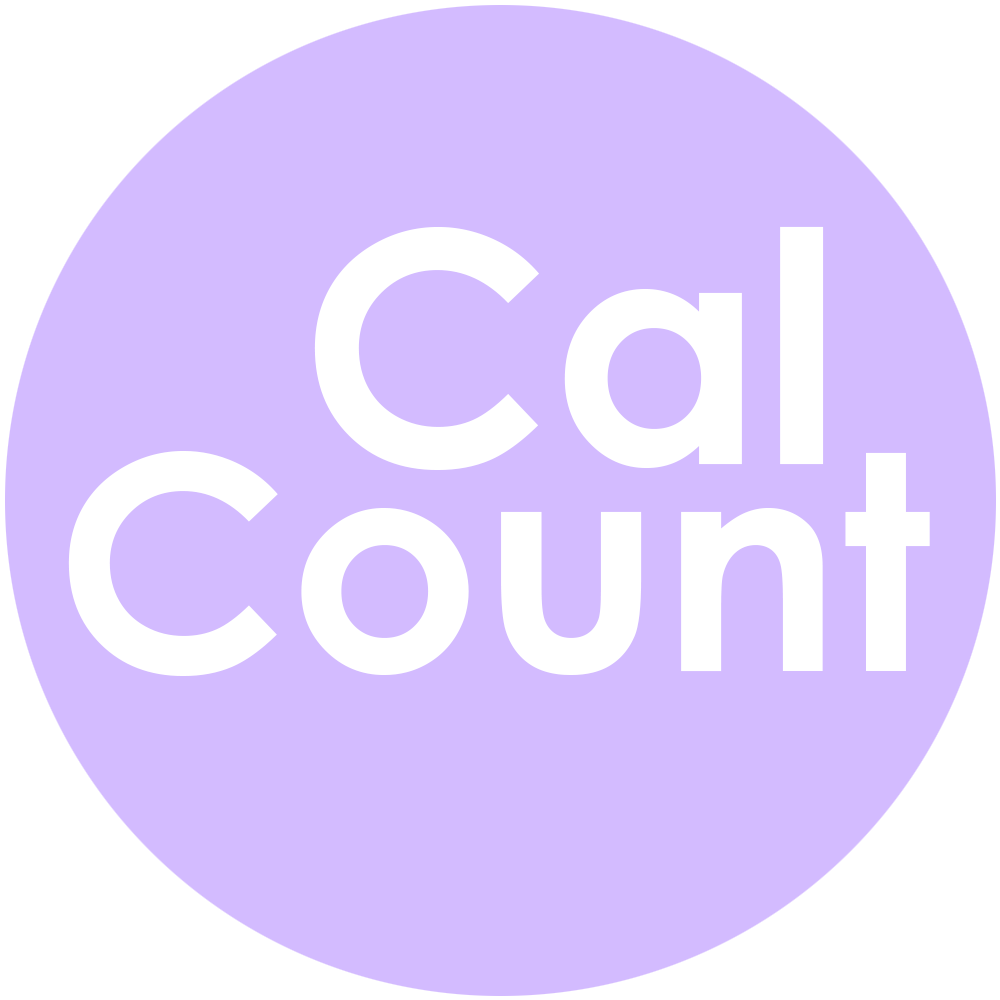
<style>
.page{position:relative;width:1000px;height:1000px;background:#d3bbff}
.page>*{position:absolute;margin:0}
.t1{font:322px "CenturyGothic-Bold";color:#ffffff}
.t2{font:300px "CenturyGothic-Bold";color:#ffffff}
</style>
<div class="page">
<p class="t1" style="left:314px;top:226px;width:510px;height:244px">Cal</p>
<p class="t2" style="left:68px;top:450px;width:862px;height:226px">Count</p>
</div>
